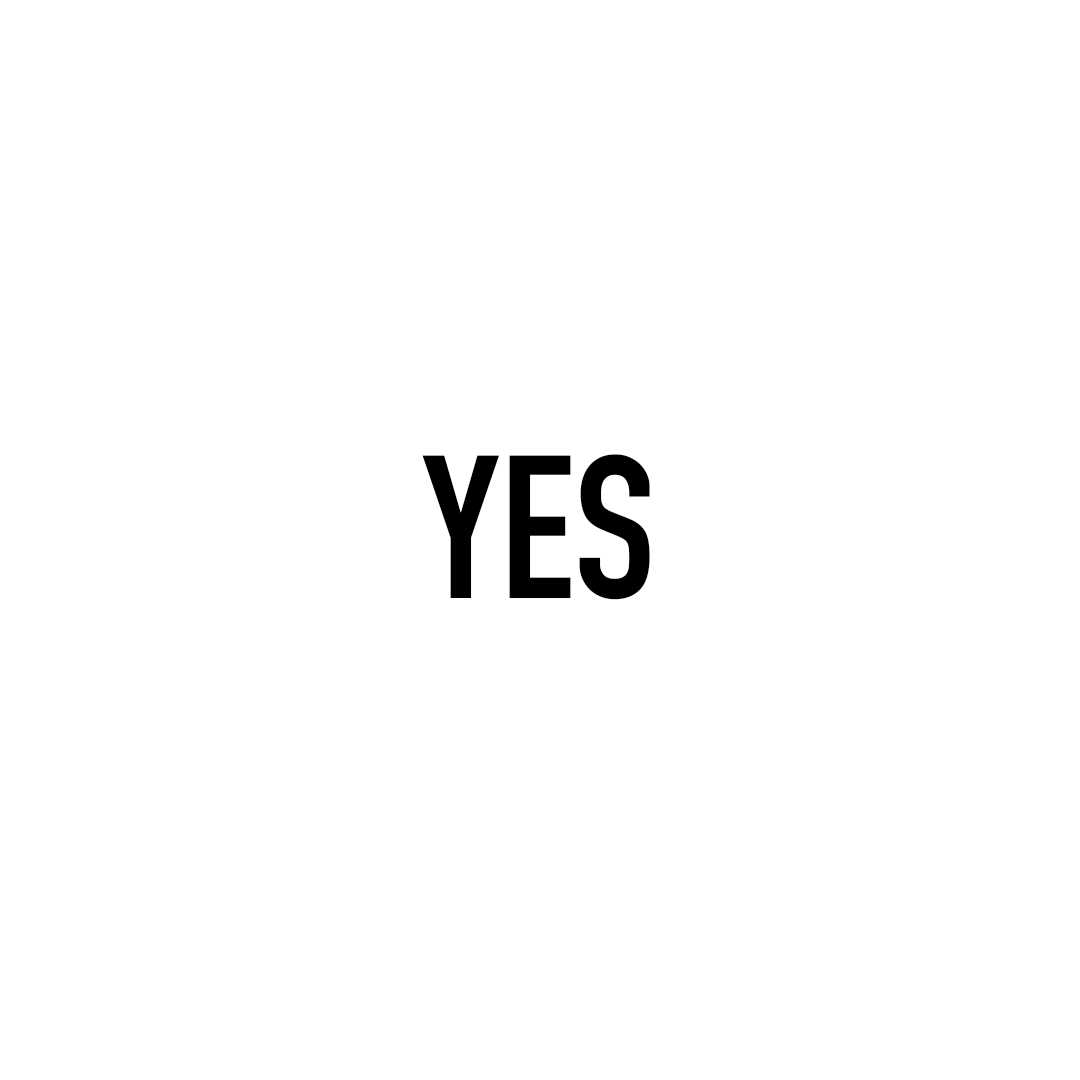
<style>
.page{position:relative;width:1080px;height:1080px;background:#ffffff}
.page>*{position:absolute;margin:0}
.t1{font:200px "DINCondensed-Bold";color:#000000}
</style>
<div class="page">
<p class="t1" style="left:422px;top:454px;width:228px;height:146px">YES</p>
</div>
